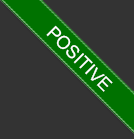
<style>
.page{position:relative;width:134px;height:139px;background:#333333}
.page>*{position:absolute;margin:0}
.t1{font:18px "ArialMT";color:#ffffff}
</style>
<div class="page">
<p class="t1" style="left:46px;top:25px;width:67px;height:67px;rotate:45deg">POSITIVE</p>
</div>
